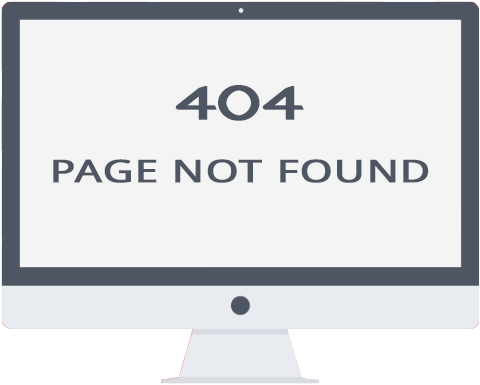
<style>
.page{position:relative;width:480px;height:385px;background:#f4f4f4}
.page>*{position:absolute;margin:0}
.t1{font:56.4px "Charger";color:#4e5563;font-weight:bold;scale:1.51 1}
.t2{font:31.2px "DroidSans";color:#4e5563;font-weight:bold;scale:1.43 1}
</style>
<div class="page">
<p class="t1" style="left:175px;top:85px;width:129px;height:36px">404</p>
<p class="t2" style="left:53px;top:159px;width:376px;height:24px">PAGE NOT FOUND</p>
</div>
